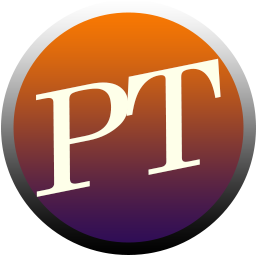
<style>
.page{position:relative;width:256px;height:256px;background:#ffffff}
.page>*{position:absolute;margin:0}
.t1{font:140.9px "Century";letter-spacing:-0.06em;color:#ffffea;scale:1.1 1}
</style>
<div class="page">
<p class="t1" style="left:36px;top:58px;width:185px;height:139px;rotate:-11deg">PT</p>
</div>
